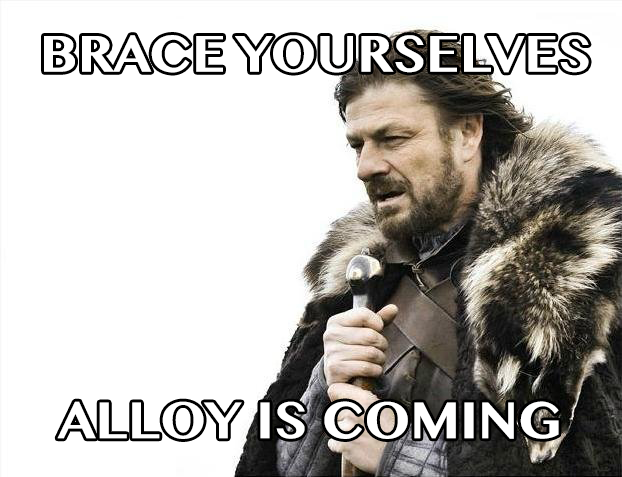
<style>
.page{position:relative;width:622px;height:477px;background:#ffffff}
.page>*{position:absolute;margin:0}
.t1{font:60px "KhmerMN-Bold";color:#ffffff}
</style>
<div class="page">
<p class="t1" style="left:44px;top:35px;width:545px;height:38px">BRACE YOURSELVES</p>
<p class="t1" style="left:57px;top:401px;width:502px;height:38px">ALLOY IS COMING</p>
</div>
